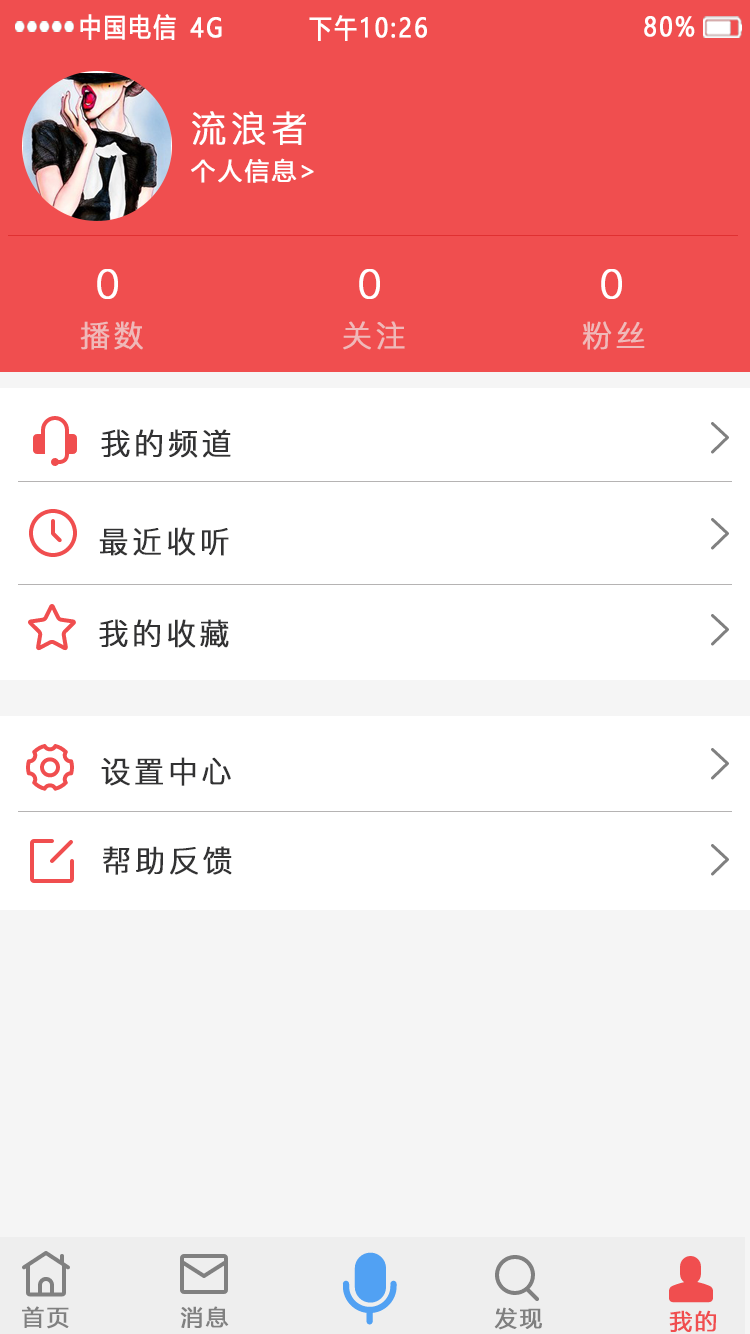
<style>
.page{position:relative;width:750px;height:1334px;background:#ffffff}
.page>*{position:absolute;margin:0}
.t1{font:25.9px "MicrosoftYaHei";letter-spacing:0.1em;color:#ffffff;text-transform:uppercase;font-weight:bold;scale:0.85 1}
.t2{font:36px "PingFang-SC-Regular";letter-spacing:0.1em;color:#ffffff;text-transform:uppercase;font-weight:bold}
.t3{font:24px "MicrosoftYaHei";letter-spacing:0.1em;color:#ffffff;text-transform:uppercase;font-weight:bold}
.t4{font:40px "PingFang-SC-Regular";letter-spacing:0.1em;color:#ffffff;text-transform:uppercase;font-weight:bold}
.t5{font:30px "PingFang-SC-Regular";letter-spacing:0.1em;color:#efb9b9;text-transform:uppercase;font-weight:bold}
.t6{font:30px "PingFang-SC-Regular";letter-spacing:0.1em;color:#323233;text-transform:uppercase;font-weight:bold}
.t7{font:22px "MicrosoftYaHei";letter-spacing:0.1em;color:#808080;text-transform:uppercase;font-weight:bold}
.t8{font:22px "MicrosoftYaHei";letter-spacing:0.1em;color:#f04e4f;text-transform:uppercase;font-weight:bold}
</style>
<div class="page">
<p class="t1" style="left:80px;top:14px;width:96px;height:26px">中国电信</p>
<p class="t1" style="left:190px;top:17px;width:32px;height:21px">4G</p>
<p class="t1" style="left:309px;top:15px;width:118px;height:26px">下午10:26</p>
<p class="t1" style="left:644px;top:16px;width:51px;height:21px">80%</p>
<p class="t2" style="left:192px;top:111px;width:114px;height:34px">流浪者</p>
<p class="t3" style="left:191px;top:158px;width:123px;height:25px">个人信息&gt;</p>
<p class="t4" style="left:97px;top:269px;width:21px;height:30px">0</p>
<p class="t4" style="left:359px;top:269px;width:21px;height:30px">0</p>
<p class="t4" style="left:601px;top:269px;width:21px;height:30px">0</p>
<p class="t5" style="left:80px;top:321px;width:63px;height:29px">播数</p>
<p class="t5" style="left:343px;top:321px;width:62px;height:29px">关注</p>
<p class="t5" style="left:582px;top:321px;width:63px;height:29px">粉丝</p>
<p class="t6" style="left:101px;top:429px;width:130px;height:29px">我的频道</p>
<p class="t6" style="left:99px;top:527px;width:130px;height:29px">最近收听</p>
<p class="t6" style="left:99px;top:619px;width:130px;height:29px">我的收藏</p>
<p class="t6" style="left:101px;top:757px;width:130px;height:29px">设置中心</p>
<p class="t6" style="left:103px;top:846px;width:129px;height:29px">帮助反馈</p>
<p class="t7" style="left:22px;top:1306px;width:47px;height:23px">首页</p>
<p class="t7" style="left:180px;top:1306px;width:49px;height:22px">消息</p>
<p class="t7" style="left:494px;top:1307px;width:48px;height:23px">发现</p>
<p class="t8" style="left:669px;top:1310px;width:47px;height:22px">我的</p>
</div>
